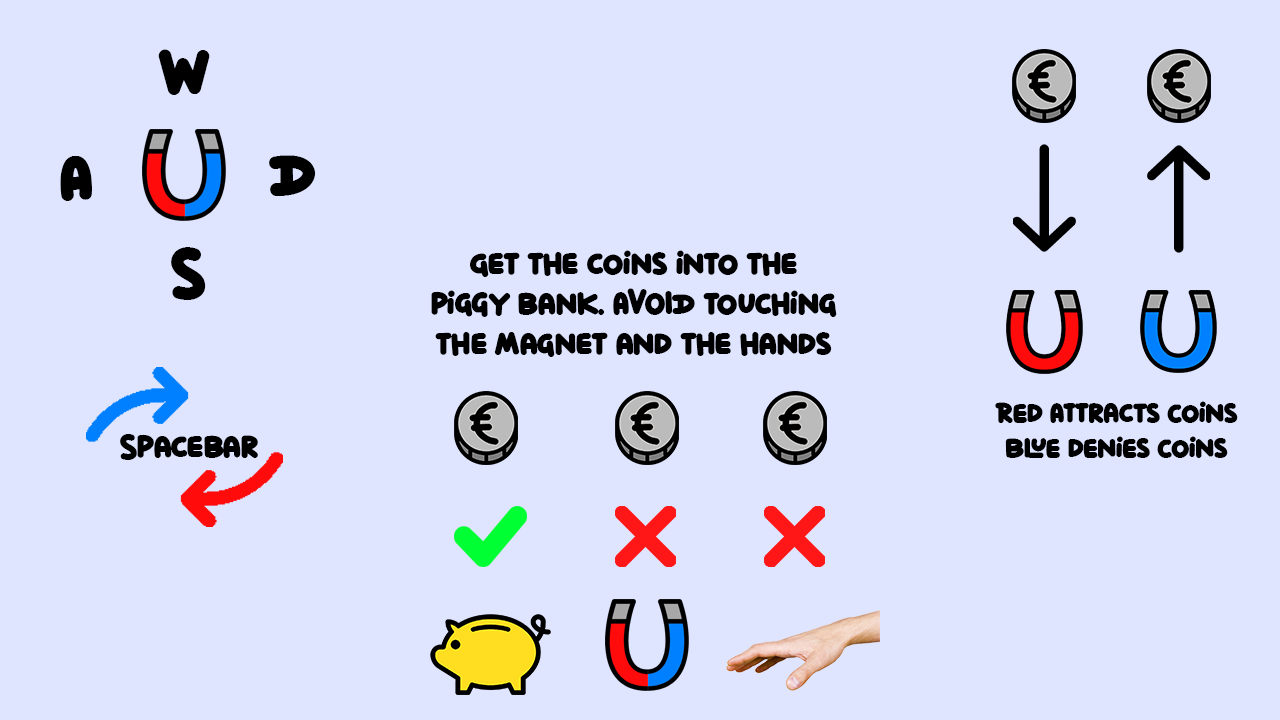
<style>
.page{position:relative;width:1280px;height:720px;background:#dfe5ff}
.page>*{position:absolute;margin:0}
.t1{font:66.7px "DiloWorldRegular";color:#000000}
.t2{font:33.3px "DiloWorldRegular";color:#000000}
.t3{font:29.2px "DiloWorldRegular";color:#000000}
</style>
<div class="page">
<p class="t1" style="left:158px;top:49px;width:52px;height:46px">W</p>
<p class="t1" style="left:60px;top:156px;width:32px;height:45px">A</p>
<p class="t1" style="left:269px;top:155px;width:47px;height:41px">D</p>
<p class="t1" style="left:171px;top:247px;width:35px;height:53px">S</p>
<p class="t2" style="left:431px;top:250px;width:406px;height:107px;text-align:center">Get the coins into the piggy bank. AVOID touching the magnet and the hands</p>
<p class="t3" style="left:995px;top:401px;width:243px;height:57px;text-align:center">Red Attracts Coins<br>Blue denies Coins</p>
<p class="t2" style="left:120px;top:434px;width:138px;height:26px">Spacebar</p>
</div>
